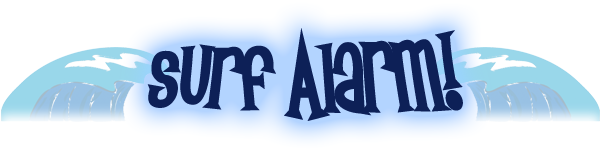
<style>
.page{position:relative;width:600px;height:150px;background:#ffffff}
.page>*{position:absolute;margin:0}
.t1{font:91.7px "SurfSafari";color:#0d2057}
</style>
<div class="page">
<p class="t1" style="left:147px;top:28px;width:316px;height:93px">surf Alarm!</p>
</div>
